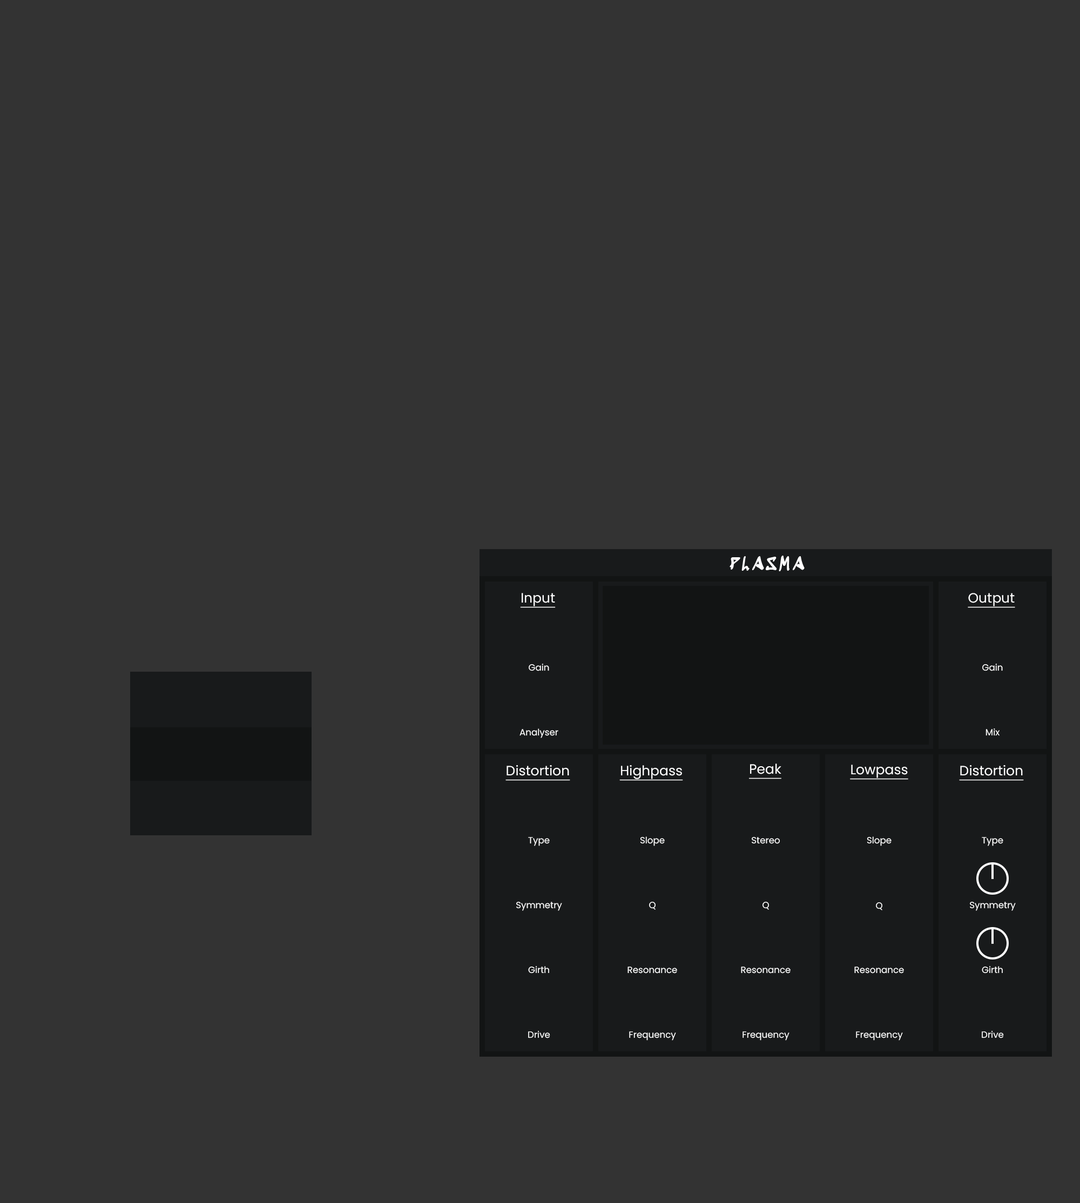
<style>
.page{position:relative;width:1080px;height:1203px;background:#333333}
.page>*{position:absolute;margin:0}
.t1{font:18px "SedgwickAveDisplay-Regular";letter-spacing:0.1em;color:#ffffff}
.t2{font:13.5px "Poppins-Regular";color:#ffffff;text-decoration:underline}
.t3{font:9px "Poppins-Regular";color:#ffffff}
</style>
<div class="page">
<p class="t1" style="left:730px;top:556px;width:75px;height:15px">PLASMA</p>
<p class="t2" style="left:520px;top:593px;width:36px;height:15px">Input</p>
<p class="t2" style="left:968px;top:593px;width:47px;height:15px">Output</p>
<p class="t3" style="left:529px;top:664px;width:20px;height:7px">Gain</p>
<p class="t3" style="left:982px;top:664px;width:21px;height:7px">Gain</p>
<p class="t3" style="left:519px;top:728px;width:39px;height:10px">Analyser</p>
<p class="t3" style="left:985px;top:728px;width:15px;height:8px">Mix</p>
<p class="t2" style="left:505px;top:765px;width:65px;height:16px">Distortion</p>
<p class="t2" style="left:619px;top:765px;width:64px;height:16px">Highpass</p>
<p class="t2" style="left:749px;top:764px;width:32px;height:15px">Peak</p>
<p class="t2" style="left:850px;top:765px;width:58px;height:15px">Lowpass</p>
<p class="t2" style="left:959px;top:765px;width:65px;height:16px">Distortion</p>
<p class="t3" style="left:528px;top:837px;width:22px;height:9px">Type</p>
<p class="t3" style="left:640px;top:836px;width:25px;height:10px">Slope</p>
<p class="t3" style="left:752px;top:837px;width:28px;height:7px">Stereo</p>
<p class="t3" style="left:867px;top:836px;width:25px;height:10px">Slope</p>
<p class="t3" style="left:982px;top:837px;width:21px;height:9px">Type</p>
<p class="t3" style="left:516px;top:902px;width:46px;height:9px">Symmetry</p>
<p class="t3" style="left:649px;top:902px;width:7px;height:8px">Q</p>
<p class="t3" style="left:762px;top:902px;width:7px;height:8px">Q</p>
<p class="t3" style="left:876px;top:902px;width:6px;height:8px">Q</p>
<p class="t3" style="left:970px;top:902px;width:46px;height:9px">Symmetry</p>
<p class="t3" style="left:528px;top:966px;width:21px;height:8px">Girth</p>
<p class="t3" style="left:627px;top:967px;width:50px;height:7px">Resonance</p>
<p class="t3" style="left:741px;top:967px;width:50px;height:7px">Resonance</p>
<p class="t3" style="left:854px;top:967px;width:50px;height:7px">Resonance</p>
<p class="t3" style="left:982px;top:966px;width:21px;height:8px">Girth</p>
<p class="t3" style="left:528px;top:1031px;width:22px;height:7px">Drive</p>
<p class="t3" style="left:629px;top:1031px;width:47px;height:10px">Frequency</p>
<p class="t3" style="left:742px;top:1031px;width:47px;height:10px">Frequency</p>
<p class="t3" style="left:856px;top:1031px;width:47px;height:10px">Frequency</p>
<p class="t3" style="left:982px;top:1031px;width:22px;height:7px">Drive</p>
</div>
